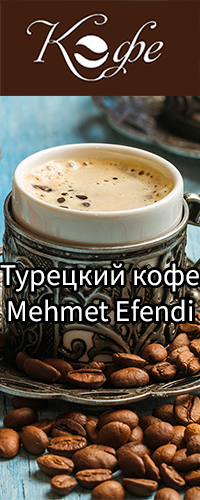
<style>
.page{position:relative;width:200px;height:500px}
.page>*{position:absolute;margin:0}
.t1{font:30px/36px "SourceSansPro-Regular";color:#ffffff}
</style>
<div class="page">
<p class="t1" style="left:0px;top:263px;width:199px;height:59px;text-align:right">Турецкий кофе<br> Mehmet Efendi</p>
</div>
